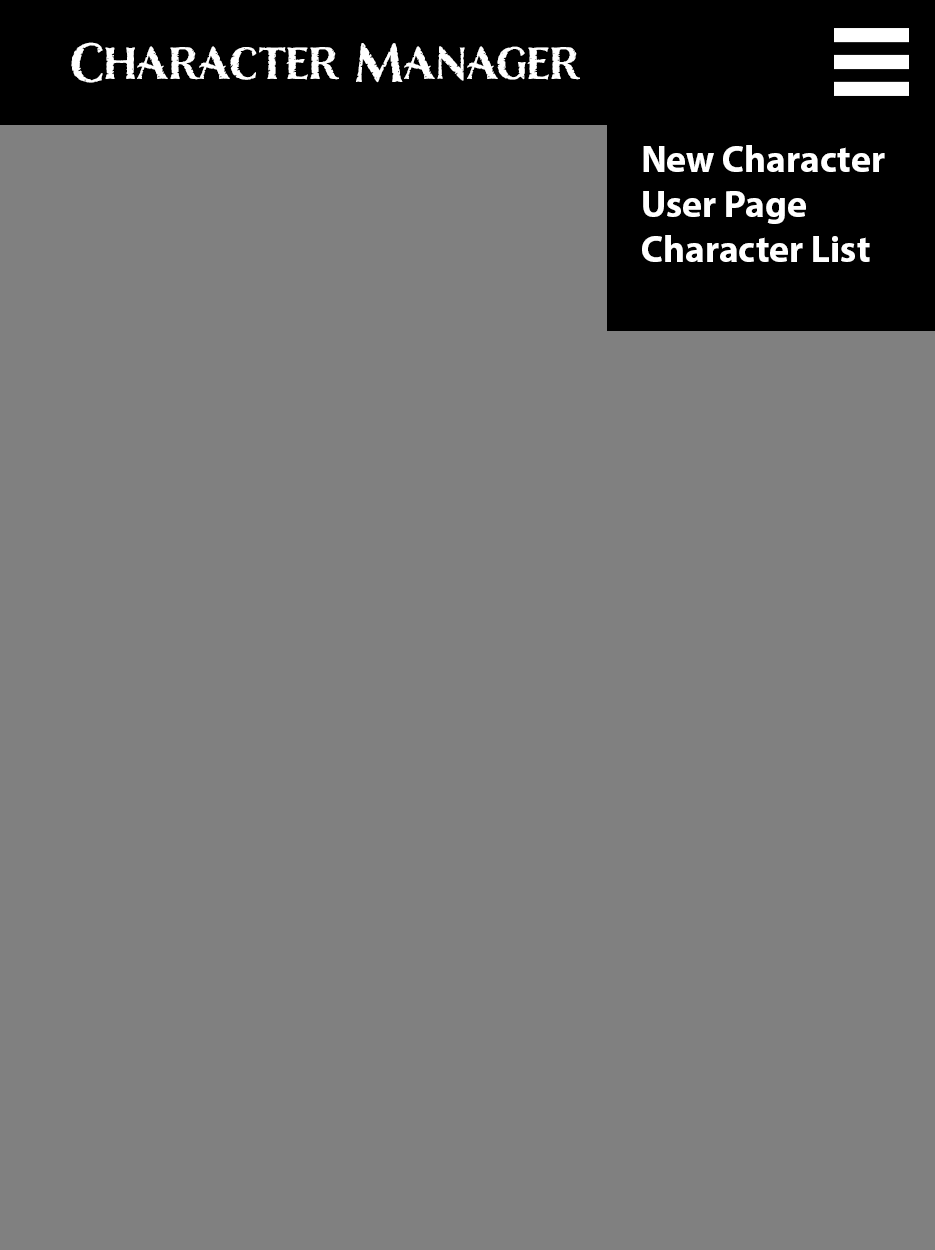
<style>
.page{position:relative;width:935px;height:1250px;background:#808080}
.page>*{position:absolute;margin:0}
.t1{font:50px "Nelson-Bold";color:#ffffff}
.t2{font:37.5px "MyriadPro-Bold";color:#ffffff}
</style>
<div class="page">
<p class="t1" style="left:71px;top:42px;width:509px;height:41px">Character Manager</p>
<p class="t2" style="left:642px;top:145px;width:243px;height:117px">New Character<br>User Page<br>Character List</p>
</div>
